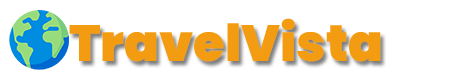
<style>
.page{position:relative;width:450px;height:80px;background:#ffffff}
.page>*{position:absolute;margin:0}
.t1{font:51px "Poppins-Black";color:#f39c12}
</style>
<div class="page">
<p class="t1" style="left:69px;top:18px;width:312px;height:44px">TravelVista</p>
</div>
